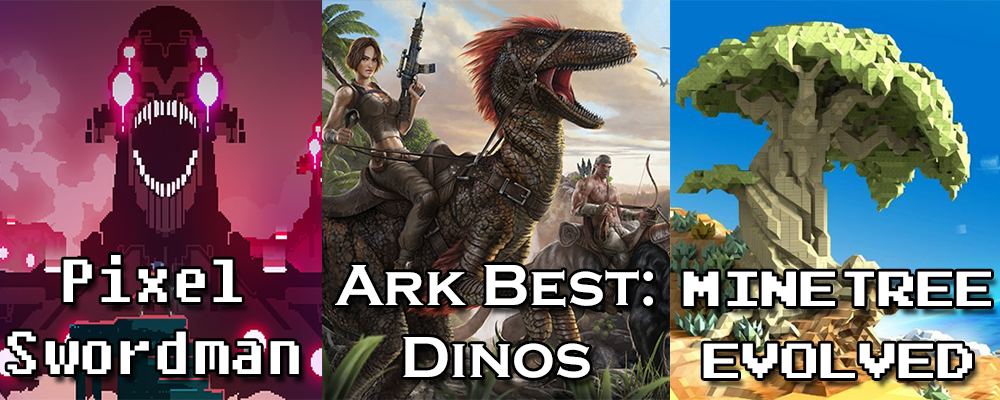
<style>
.page{position:relative;width:1000px;height:400px}
.page>*{position:absolute;margin:0}
.t1{font:60px "Fixedsys";color:#ffffff}
.t2{font:60px "CopperplateGothic-Bold";color:#ffffff}
.t3{font:39px/72px "Emulogic";color:#ffffff}
</style>
<div class="page">
<p class="t1" style="left:7px;top:255px;width:292px;height:119px;text-align:center">Pixel<br>Swordman</p>
<p class="t2" style="left:335px;top:265px;width:318px;height:113px;text-align:center">Ark Best:<br>Dinos</p>
<p class="t3" style="left:683px;top:271px;width:308px;height:107px;text-align:center">MinEtree<br>Evolved</p>
</div>
